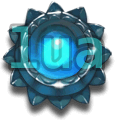
<style>
.page{position:relative;width:115px;height:120px;background:#ffffff}
.page>*{position:absolute;margin:0}
.t1{font:60px "Consolas-Bold"}
</style>
<div class="page">
<p class="t1" style="left:11px;top:26px;width:91px;height:43px">lua</p>
</div>
